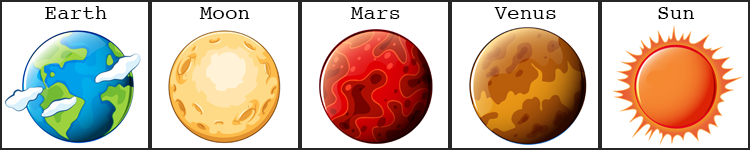
<style>
.page{position:relative;width:750px;height:150px;background:#ffffff}
.page>*{position:absolute;margin:0}
.t1{font:21px "Courier";color:#000000}
</style>
<div class="page">
<p class="t1" style="left:45px;top:6px;width:62px;height:13px">Earth</p>
<p class="t1" style="left:199px;top:7px;width:51px;height:12px">Moon</p>
<p class="t1" style="left:350px;top:7px;width:50px;height:12px">Mars</p>
<p class="t1" style="left:494px;top:7px;width:62px;height:12px">Venus</p>
<p class="t1" style="left:658px;top:7px;width:37px;height:12px">Sun</p>
</div>
